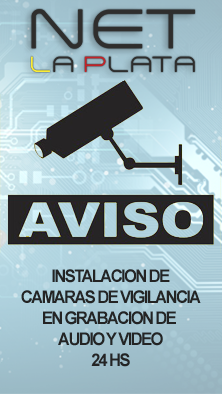
<style>
.page{position:relative;width:222px;height:394px}
.page>*{position:absolute;margin:0}
.t1{font:17.5px "Arial-BoldMT";letter-spacing:-0.1em;color:#242424;scale:0.95 1}
</style>
<div class="page">
<p class="t1" style="left:21px;top:269px;width:180px;height:98px;text-align:center">INSTALACION DE<br>CAMARAS DE VIGILANCIA<br>EN GRABACION DE <br>AUDIO Y VIDEO<br>24 HS</p>
</div>
